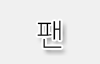
<style>
.page{position:relative;width:100px;height:64px;background:#f0f0f0}
.page>*{position:absolute;margin:0}
.t1{font:30px "NanumSquareL";color:#000000}
</style>
<div class="page">
<p class="t1" style="left:37px;top:20px;width:25px;height:28px">팬</p>
</div>
